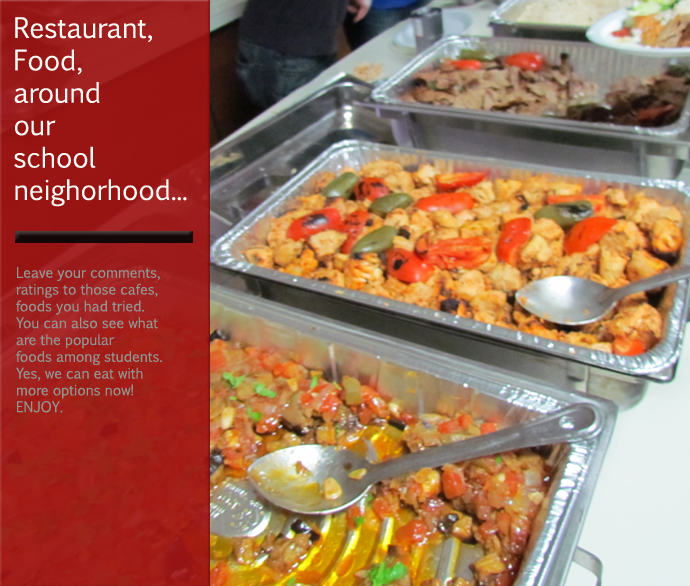
<style>
.page{position:relative;width:690px;height:586px}
.page>*{position:absolute;margin:0}
.t1{font:27px "EuphemiaCAS";color:#f5faf5}
.t2{font:14px "EuphemiaCAS";color:#929692}
</style>
<div class="page">
<p class="t1" style="left:14px;top:17px;width:173px;height:190px">Restaurant,<br>Food,<br>around <br>our<br>school<br>neighorhood...</p>
<p class="t2" style="left:16px;top:267px;width:146px;height:146px">Leave your comments, <br>ratings to those cafes,<br>foods you had tried.<br>You can also see what<br>are the popular <br>foods among students.<br>Yes, we can eat with <br>more options now!<br>ENJOY.</p>
</div>
